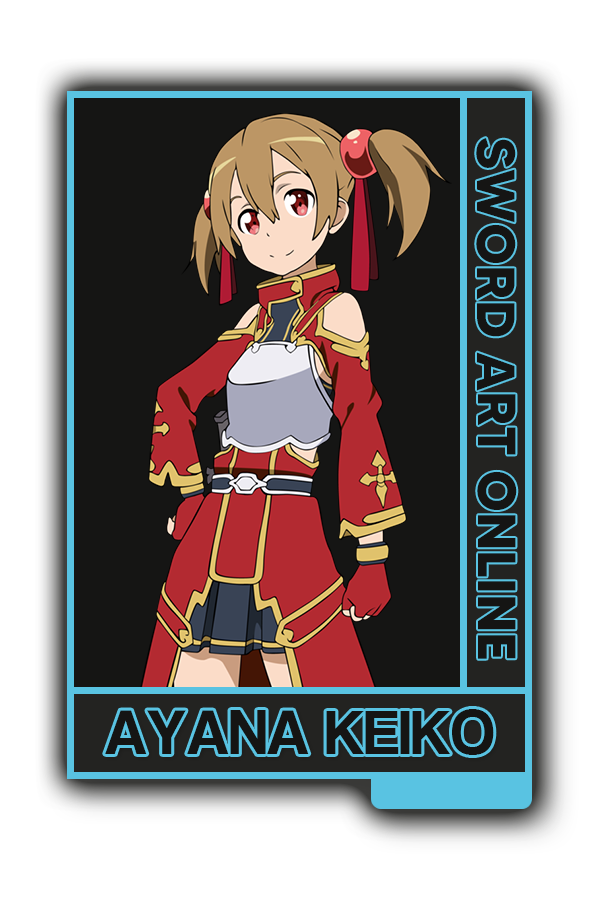
<style>
.page{position:relative;width:600px;height:900px;background:#151514}
.page>*{position:absolute;margin:0}
.t1{font:53.7px "MADETOMMY-Bold";color:#151514}
.t2{font:65.3px "CoolveticaRg-Regular";color:#151514}
</style>
<div class="page">
<p class="t1" style="left:476px;top:138px;width:41px;height:521px;rotate:90deg">SWORD ART ONLINE</p>
<p class="t2" style="left:105px;top:709px;width:389px;height:46px">AYANA KEIKO</p>
</div>
